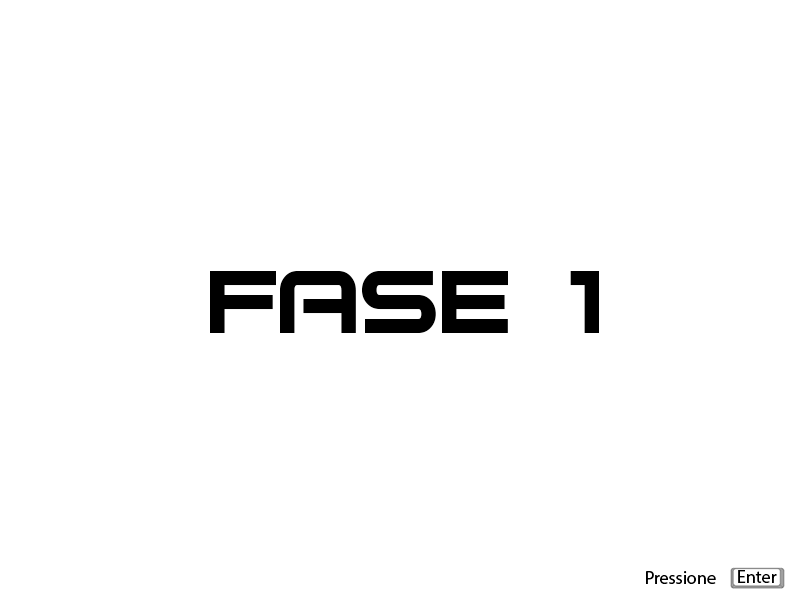
<style>
.page{position:relative;width:800px;height:600px;background:#ffffff}
.page>*{position:absolute;margin:0}
.t1{font:119.9px "Bitsumishi";color:#000000}
.t2{font:18px "MyriadHebrew-Regular";color:#000000}
</style>
<div class="page">
<p class="t1" style="left:210px;top:271px;width:389px;height:62px">FASE 1</p>
<p class="t2" style="left:646px;top:571px;width:70px;height:13px">Pressione</p>
<p class="t2" style="left:738px;top:570px;width:39px;height:13px">Enter</p>
</div>
